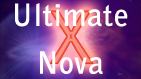
<style>
.page{position:relative;width:141px;height:79px}
.page>*{position:absolute;margin:0}
.t1{font:29.9px/23.9px "BellGothicStd-Bold";color:#ffffff;font-weight:bold}
.t2{font:71.7px "BellGothicStd-Bold";font-weight:bold}
</style>
<div class="page">
<p class="t1" style="left:15px;top:3px;width:113px;height:71px;text-align:center">Ultimate<br><br>Nova</p>
<p class="t2" style="left:49px;top:10px;width:45px;height:54px">X</p>
</div>
